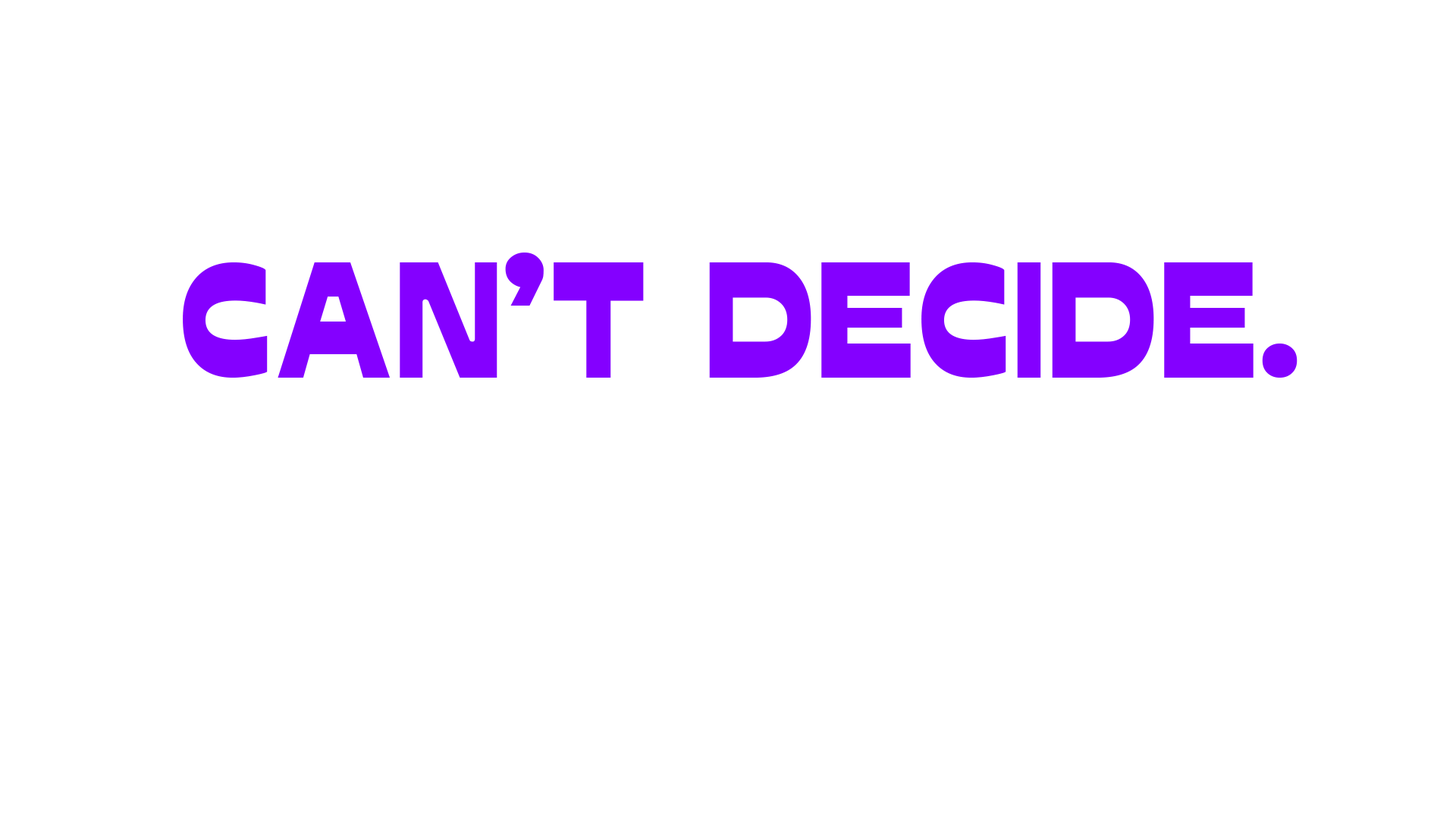
<style>
.page{position:relative;width:1456px;height:819px;background:#ffffff}
.page>*{position:absolute;margin:0}
.t1{font:158px "Glockenspiel";color:#8400ff}
</style>
<div class="page">
<p class="t1" style="left:183px;top:253px;width:1114px;height:125px">CAN’T DECIDE.</p>
</div>
